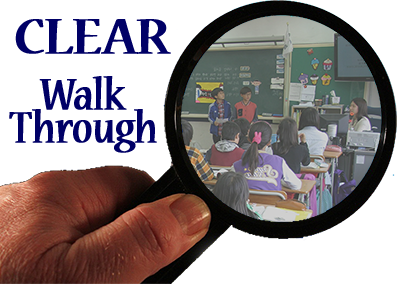
<style>
.page{position:relative;width:400px;height:284px;background:#ffffff}
.page>*{position:absolute;margin:0}
.t1{font:56px "NuevaStd-Cond";letter-spacing:-0.025em;color:#000066;font-weight:bold;scale:1.43 1}
.t2{font:49px "NuevaStd-Cond";letter-spacing:-0.025em;color:#000066;font-weight:bold;scale:1.14 1}
</style>
<div class="page">
<p class="t1" style="left:15px;top:19px;width:156px;height:35px">CLEAR</p>
<p class="t2" style="left:39px;top:76px;width:88px;height:34px">Walk</p>
<p class="t2" style="left:9px;top:109px;width:148px;height:44px">Through</p>
</div>
